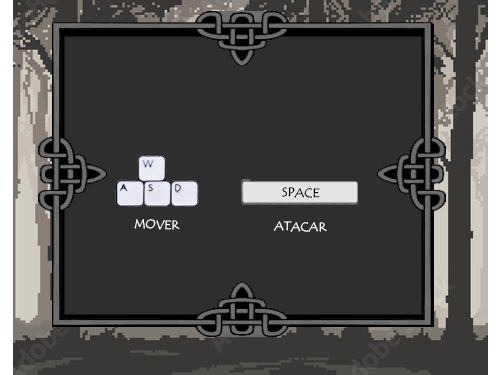
<style>
.page{position:relative;width:500px;height:375px;background:#2e2e2e}
.page>*{position:absolute;margin:0}
.t1{font:12.4px "TempusSansITC";color:#000000;scale:1.05 1}
.t2{font:12.4px "TempusSansITC";color:#ffffff;scale:1.05 1}
</style>
<div class="page">
<p class="t1" style="left:282px;top:187px;width:38px;height:11px">SPACE</p>
<p class="t2" style="left:134px;top:219px;width:46px;height:11px">MOVER</p>
<p class="t2" style="left:273px;top:221px;width:54px;height:11px">ATACAR</p>
</div>
